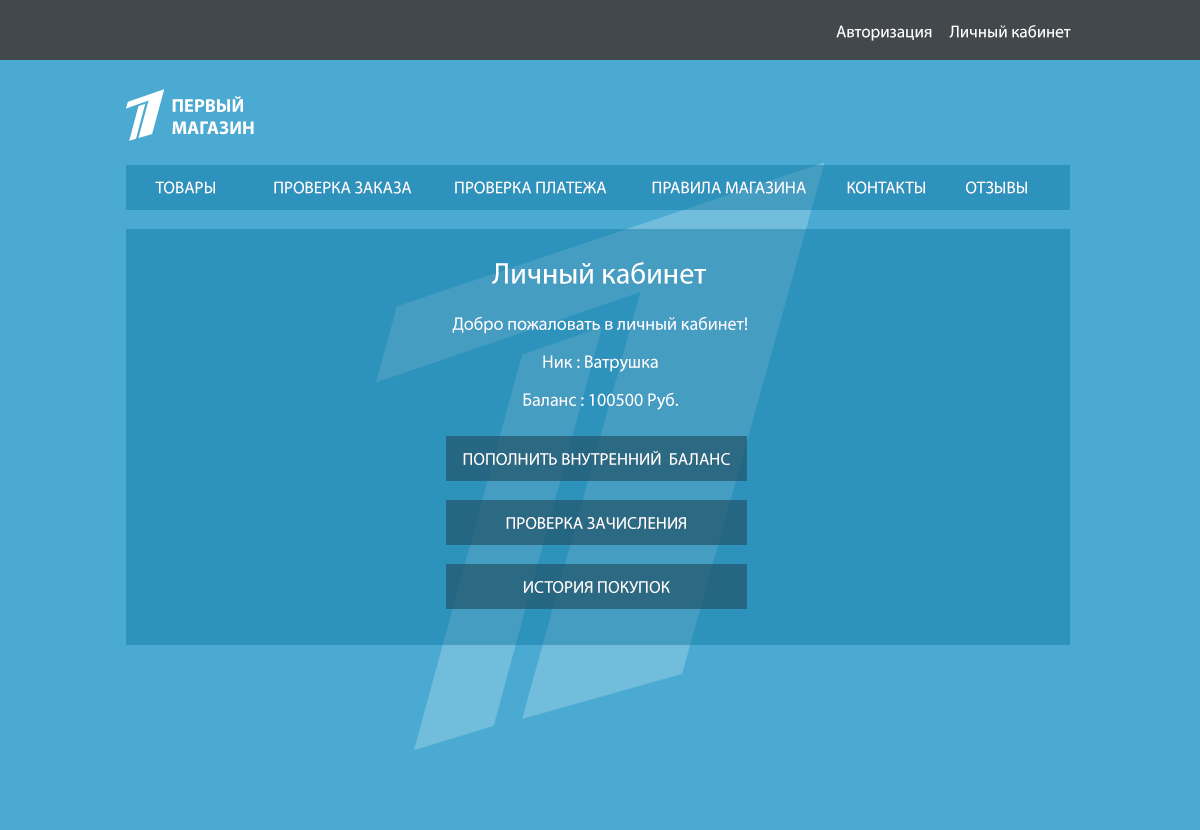
<style>
.page{position:relative;width:1200px;height:830px;background:#4aaad2}
.page>*{position:absolute;margin:0}
.t1{font:17px "MyriadPro-Regular";color:#ffffff}
.t2{font:18.5px "MyriadPro-Bold";color:#ffffff;text-transform:uppercase}
.t3{font:30px "MyriadPro-Regular";color:#ffffff}
.t4{font:18px/19px "MyriadPro-Regular";color:#ffffff}
.t5{font:17px "MyriadPro-Regular";color:#ffffff;text-transform:uppercase}
</style>
<div class="page">
<p class="t1" style="left:836px;top:25px;width:96px;height:16px">Авторизация</p>
<p class="t1" style="left:949px;top:25px;width:122px;height:13px">Личный кабинет</p>
<p class="t2" style="left:172px;top:96px;width:82px;height:39px">Первый <br>магазин</p>
<p class="t1" style="left:155px;top:181px;width:60px;height:13px">ТОВАРЫ</p>
<p class="t1" style="left:274px;top:181px;width:138px;height:13px">ПРОВЕРКА ЗАКАЗА</p>
<p class="t1" style="left:455px;top:181px;width:152px;height:13px">ПРОВЕРКА ПЛАТЕЖА</p>
<p class="t1" style="left:652px;top:181px;width:154px;height:13px">ПРАВИЛА МАГАЗИНА</p>
<p class="t1" style="left:847px;top:181px;width:78px;height:13px">КОНТАКТЫ</p>
<p class="t1" style="left:966px;top:181px;width:61px;height:13px">ОТЗЫВЫ</p>
<p class="t3" style="left:492px;top:262px;width:214px;height:22px">Личный кабинет</p>
<p class="t4" style="left:452px;top:316px;width:295px;height:94px;text-align:center">Добро пожаловать в личный кабинет!<br><br>Ник : Ватрушка<br><br>Баланс : 100500 Руб.</p>
<p class="t1" style="left:463px;top:451px;width:267px;height:14px">ПОПОЛНИТЬ ВНУТРЕННИЙ  БАЛАНС</p>
<p class="t5" style="left:506px;top:517px;width:180px;height:12px">Проверка зачисления</p>
<p class="t5" style="left:524px;top:581px;width:146px;height:12px">История покупок</p>
</div>
